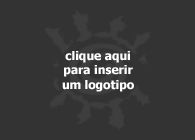
<style>
.page{position:relative;width:195px;height:140px;background:#333333}
.page>*{position:absolute;margin:0}
.t1{font:12px "Tahoma-Bold";color:#ffffff}
</style>
<div class="page">
<p class="t1" style="left:62px;top:51px;width:72px;height:41px;text-align:center">clique aqui<br>para inserir<br>um logotipo</p>
</div>
